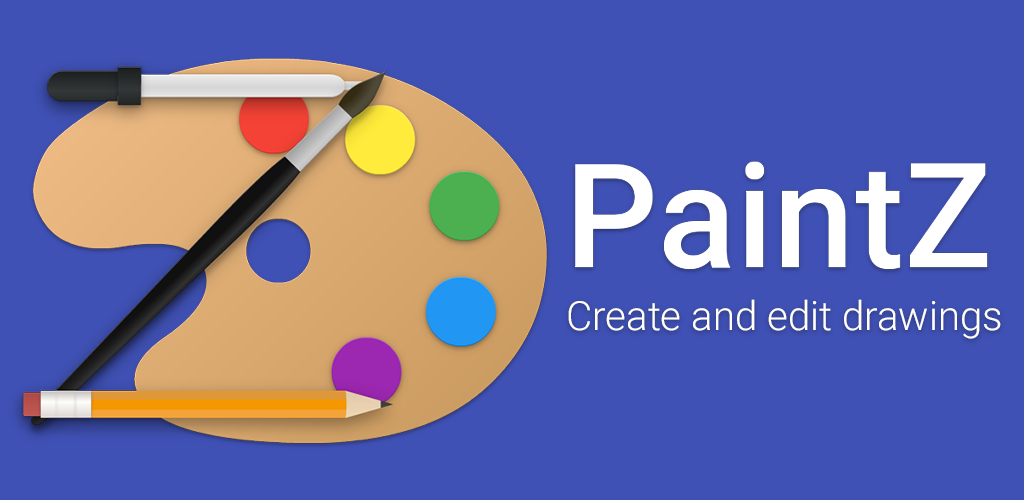
<style>
.page{position:relative;width:1024px;height:500px;background:#3f51b5}
.page>*{position:absolute;margin:0}
.t1{font:40.2px "Roboto-Light";color:#ffffff}
</style>
<div class="page">
<p class="t1" style="left:568px;top:299px;width:433px;height:40px">Create and edit drawings</p>
<p class="t1" style="left:568px;top:299px;width:433px;height:40px">Create and edit drawings</p>
</div>
